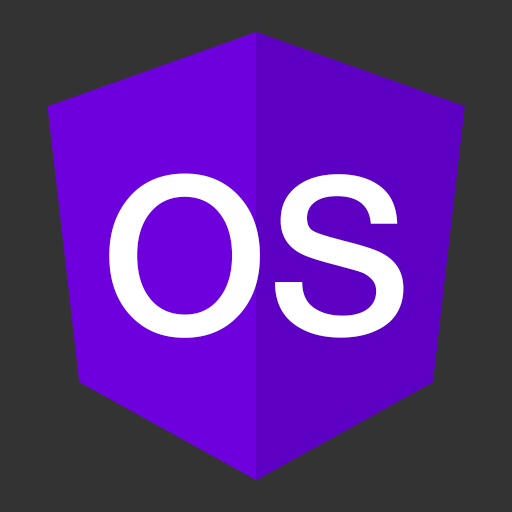
<style>
.page{position:relative;width:512px;height:512px;background:#333333}
.page>*{position:absolute;margin:0}
.t1{font:220px "HelveticaNeueCyr-Medium";color:#ffffff}
</style>
<div class="page">
<p class="t1" style="left:109px;top:173px;width:295px;height:165px">OS</p>
</div>
